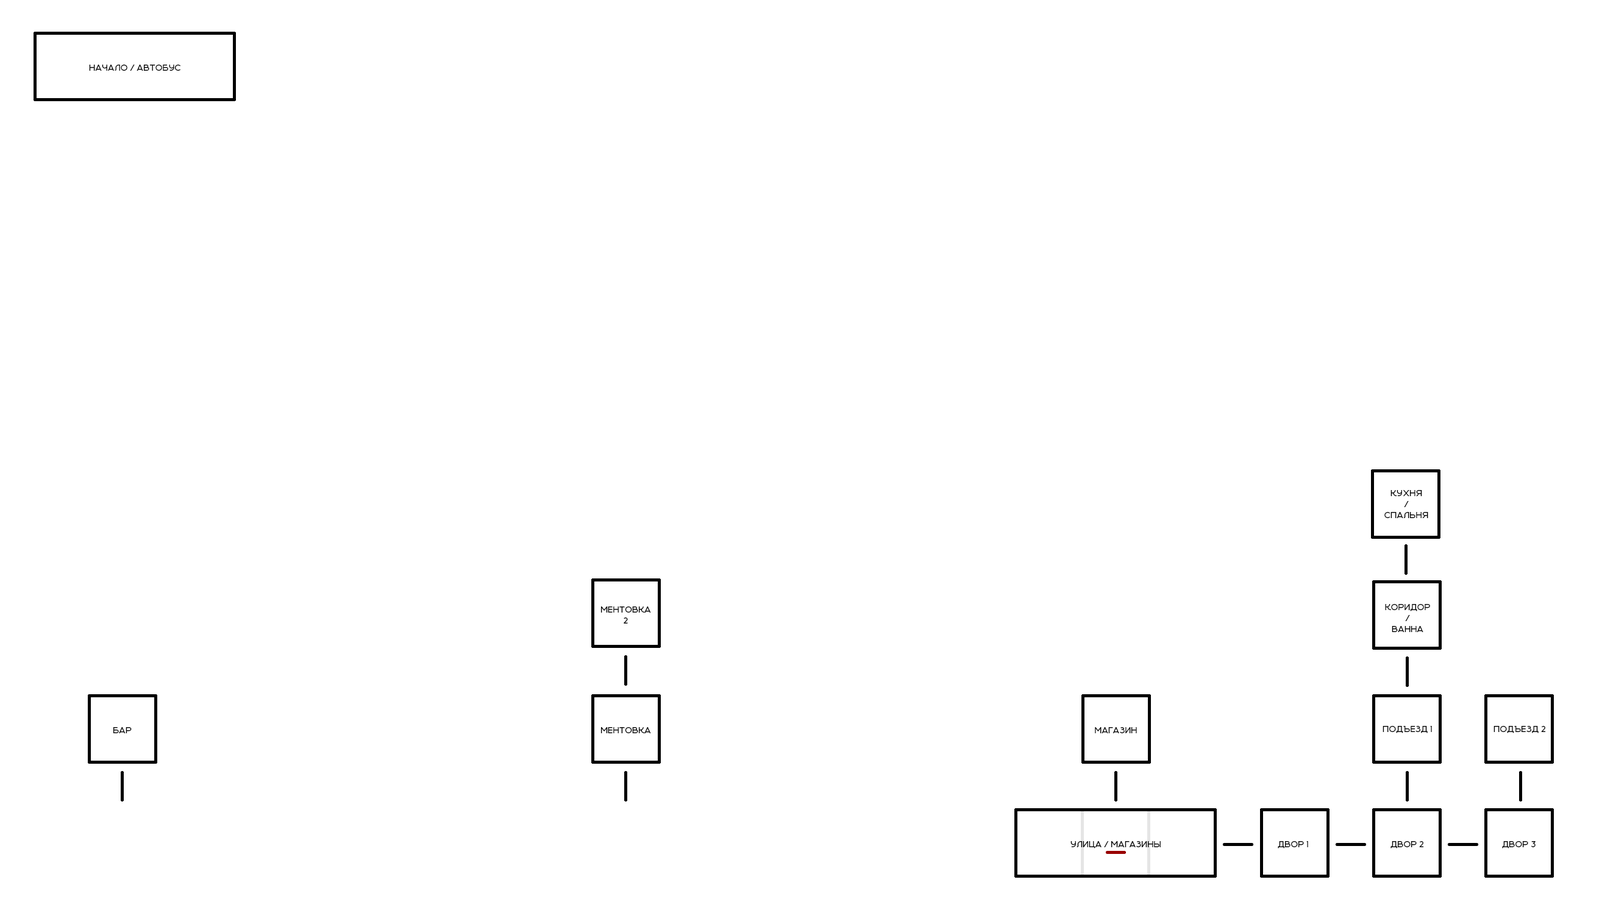
<style>
.page{position:relative;width:1602px;height:910px;background:#ffffff}
.page>*{position:absolute;margin:0}
.t1{font:9px "Cruinn-Bold";color:#000000}
</style>
<div class="page">
<p class="t1" style="left:89px;top:65px;width:92px;height:6px">НАЧАЛО / АВТОБУС</p>
<p class="t1" style="left:1384px;top:490px;width:44px;height:28px;text-align:center">КУХНЯ<br>/<br>СПАЛЬНЯ</p>
<p class="t1" style="left:1385px;top:604px;width:45px;height:28px;text-align:center">КОРИДОР<br>/<br>ВАННА</p>
<p class="t1" style="left:600px;top:606px;width:51px;height:17px;text-align:center">МЕНТОВКА<br>2</p>
<p class="t1" style="left:1382px;top:726px;width:50px;height:7px">ПОДЪЕЗД 1</p>
<p class="t1" style="left:1493px;top:726px;width:52px;height:7px">ПОДЪЕЗД 2</p>
<p class="t1" style="left:113px;top:727px;width:19px;height:6px">БАР</p>
<p class="t1" style="left:600px;top:727px;width:51px;height:6px">МЕНТОВКА</p>
<p class="t1" style="left:1094px;top:727px;width:43px;height:6px">МАГАЗИН</p>
<p class="t1" style="left:1070px;top:841px;width:90px;height:7px">УЛИЦА / МАГАЗИНЫ</p>
<p class="t1" style="left:1277px;top:841px;width:31px;height:7px">ДВОР 1</p>
<p class="t1" style="left:1390px;top:841px;width:34px;height:7px">ДВОР 2</p>
<p class="t1" style="left:1502px;top:841px;width:33px;height:7px">ДВОР 3</p>
</div>
